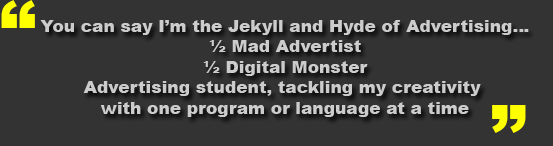
<style>
.page{position:relative;width:553px;height:146px;background:#333333}
.page>*{position:absolute;margin:0}
.t1{font:72px "Arial-Black";color:#ffff00}
.t2{font:17px "Arial-Black";color:#cccccc}
</style>
<div class="page">
<p class="t1" style="left:1px;top:0px;width:34px;height:28px">“</p>
<p class="t2" style="left:40px;top:20px;width:489px;height:97px;text-align:center">You can say I’m the Jekyll and Hyde of Advertising…<br>½ Mad Advertist<br>½ Digital Monster<br>Advertising student, tackling my creativity <br>with one program or language at a time</p>
<p class="t1" style="left:492px;top:105px;width:34px;height:28px;rotate:180deg">“</p>
</div>
